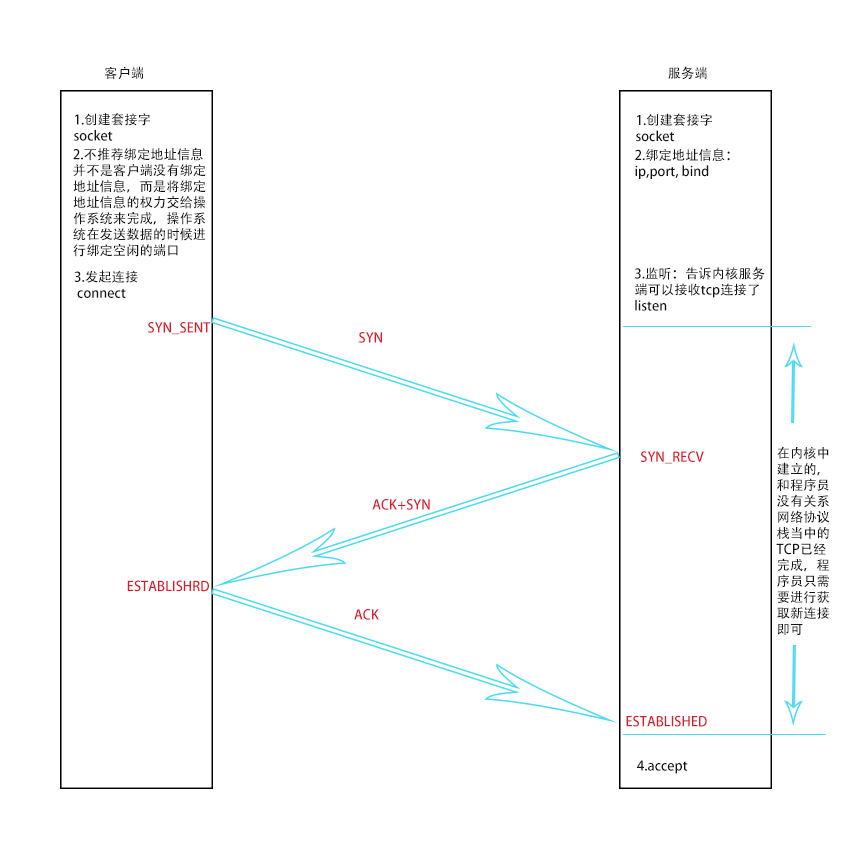
<style>
.page{position:relative;width:852px;height:849px;background:#ffffff}
.page>*{position:absolute;margin:0}
.t1{font:13.3px "AdobeHeitiStd-Regular";color:#151414}
.t2{font:13.3px "AdobeHeitiStd-Regular";color:#141212}
.t3{font:13.3px "AdobeHeitiStd-Regular";color:#da1c2a}
</style>
<div class="page">
<p class="t1" style="left:105px;top:66px;width:39px;height:14px">客户端</p>
<p class="t1" style="left:668px;top:66px;width:39px;height:14px">服务端</p>
<p class="t2" style="left:74px;top:113px;width:76px;height:28px">1.创建套接字<br>socket</p>
<p class="t2" style="left:636px;top:113px;width:76px;height:29px">1.创建套接字<br>socket</p>
<p class="t2" style="left:73px;top:147px;width:133px;height:110px">2.不推荐绑定地址信息<br>并不是客户端没有绑定<br>地址信息，而是将绑定<br>地址信息的权力交给操<br>作系统来完成，操作系<br>统在发送数据的时候进<br>行绑定空闲的端口</p>
<p class="t2" style="left:635px;top:148px;width:95px;height:31px">2.绑定地址信息：<br>ip,port, bind</p>
<p class="t2" style="left:74px;top:270px;width:64px;height:28px">3.发起连接<br> connect</p>
<p class="t2" style="left:634px;top:267px;width:131px;height:44px">3.监听：告诉内核服务<br>端可以接收tcp连接了<br>listen</p>
<p class="t3" style="left:148px;top:322px;width:63px;height:13px">SYN_SENT</p>
<p class="t3" style="left:359px;top:332px;width:23px;height:11px">SYN</p>
<p class="t1" style="left:776px;top:446px;width:54px;height:189px">在内核中<br>建立的，<br>和程序员<br>没有关系<br>网络协议<br>栈当中的<br>TCP已经<br>完成，程<br>序员只需<br>要进行获<br>取新连接<br>即可</p>
<p class="t3" style="left:640px;top:451px;width:64px;height:13px">SYN_RECV</p>
<p class="t3" style="left:372px;top:499px;width:58px;height:11px">ACK+SYN</p>
<p class="t3" style="left:127px;top:580px;width:82px;height:12px">ESTABLISHRD</p>
<p class="t3" style="left:354px;top:609px;width:25px;height:11px">ACK</p>
<p class="t3" style="left:626px;top:715px;width:81px;height:12px">ESTABLISHED</p>
<p class="t1" style="left:637px;top:760px;width:51px;height:14px">4.accept</p>
</div>
